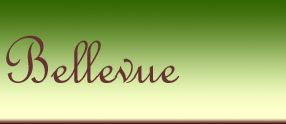
<style>
.page{position:relative;width:286px;height:124px}
.page>*{position:absolute;margin:0}
.t1{font:71.7px "FrenchScriptMT";color:#663333}
</style>
<div class="page">
<p class="t1" style="left:6px;top:35px;width:174px;height:48px">Bellevue</p>
</div>
